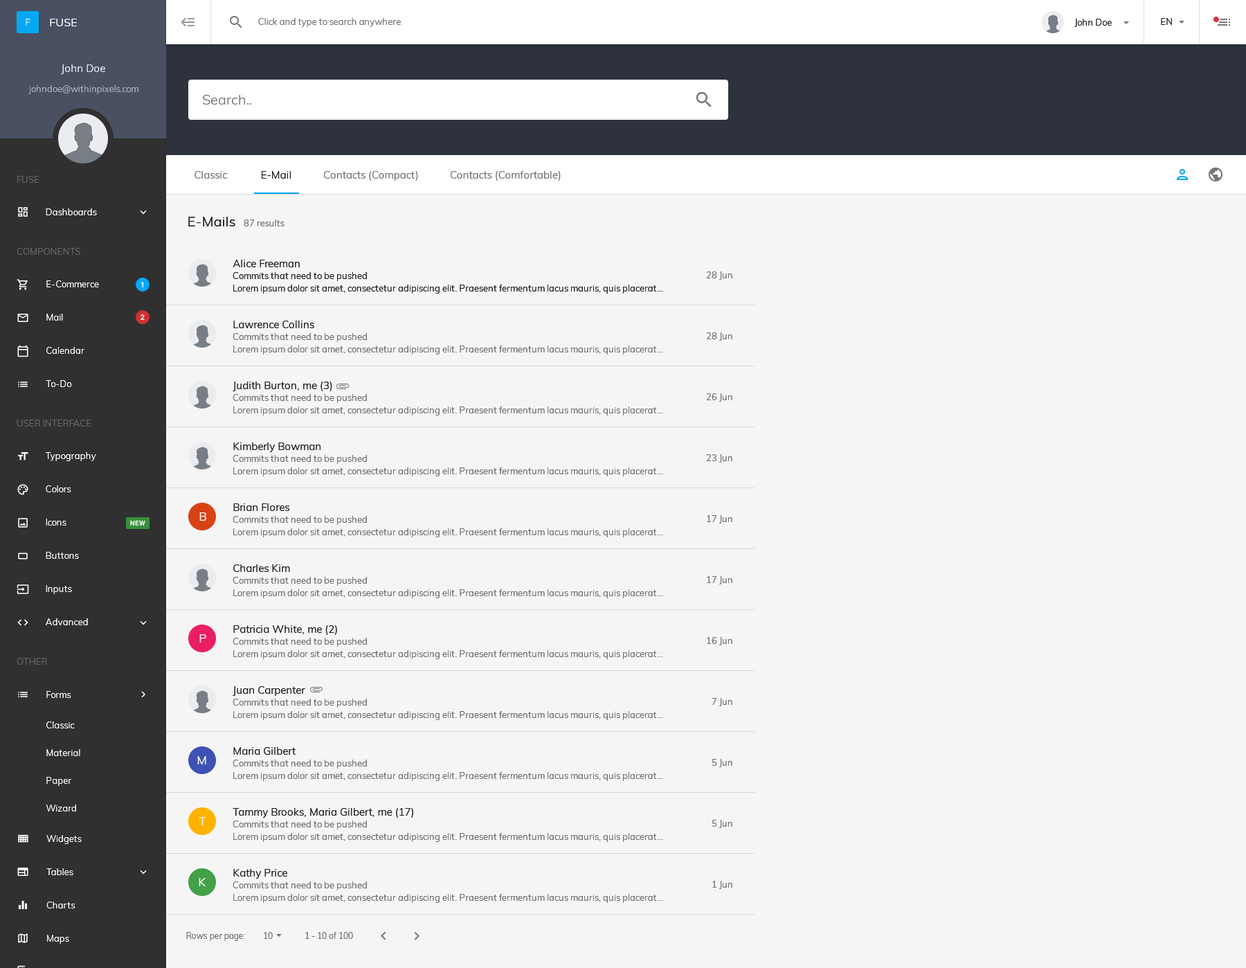
<style>
.page{position:relative;width:1246px;height:968px;background:#f5f5f5}
.page>*{position:absolute;margin:0}
.t1{font:13.8px "Muli-Light";color:#707070}
.t2{font:10.4px "Muli-Regular";color:#757575}
.t3{font:10.4px "Muli-Regular";color:#212121}
.t4{font:13.8px "Muli-Regular";color:#202020}
.t5{font:9px "Muli-Regular";color:#707070}
.t6{font:10.4px "Muli-Regular";color:#202020}
.t7{font:9px/12.5px "Muli-Regular";color:#202020}
.t8{font:9px/12.5px "Muli-Regular";color:#707070}
.t9{font:11.8px "Muli-Regular";color:#ffffff}
.t10{font:8.3px "Muli-Regular";color:#707070}
</style>
<div class="page">
<p class="t1" style="left:203px;top:95px;width:48px;height:10px">Search..</p>
<p class="t2" style="left:195px;top:171px;width:33px;height:8px">Classic</p>
<p class="t3" style="left:262px;top:171px;width:29px;height:8px">E-Mail</p>
<p class="t2" style="left:324px;top:171px;width:94px;height:10px">Contacts (Compact)</p>
<p class="t2" style="left:451px;top:171px;width:110px;height:10px">Contacts (Comfortable)</p>
<p class="t4" style="left:188px;top:217px;width:47px;height:9px">E-Mails</p>
<p class="t5" style="left:244px;top:219px;width:41px;height:7px">87 results</p>
<p class="t6" style="left:233px;top:260px;width:67px;height:7px">Alice Freeman</p>
<p class="t7" style="left:233px;top:272px;width:430px;height:22px">Commits that need to be pushed<br>Lorem ipsum dolor sit amet, consectetur adipiscing elit. Praesent fermentum lacus mauris, quis placerat...</p>
<p class="t5" style="left:706px;top:271px;width:26px;height:9px">28 Jun</p>
<p class="t6" style="left:233px;top:321px;width:81px;height:7px">Lawrence Collins</p>
<p class="t8" style="left:233px;top:333px;width:430px;height:21px">Commits that need to be pushed<br>Lorem ipsum dolor sit amet, consectetur adipiscing elit. Praesent fermentum lacus mauris, quis placerat...</p>
<p class="t5" style="left:706px;top:332px;width:26px;height:9px">28 Jun</p>
<p class="t6" style="left:233px;top:381px;width:99px;height:11px">Judith Burton, me (3)</p>
<p class="t8" style="left:233px;top:394px;width:430px;height:21px">Commits that need to be pushed<br>Lorem ipsum dolor sit amet, consectetur adipiscing elit. Praesent fermentum lacus mauris, quis placerat...</p>
<p class="t5" style="left:706px;top:393px;width:26px;height:9px">26 Jun</p>
<p class="t6" style="left:233px;top:442px;width:88px;height:11px">Kimberly Bowman</p>
<p class="t8" style="left:233px;top:455px;width:430px;height:21px">Commits that need to be pushed<br>Lorem ipsum dolor sit amet, consectetur adipiscing elit. Praesent fermentum lacus mauris, quis placerat...</p>
<p class="t5" style="left:706px;top:454px;width:26px;height:8px">23 Jun</p>
<p class="t6" style="left:233px;top:503px;width:56px;height:8px">Brian Flores</p>
<p class="t9" style="left:199px;top:512px;width:7px;height:9px">B</p>
<p class="t8" style="left:233px;top:516px;width:430px;height:21px">Commits that need to be pushed<br>Lorem ipsum dolor sit amet, consectetur adipiscing elit. Praesent fermentum lacus mauris, quis placerat...</p>
<p class="t5" style="left:707px;top:515px;width:25px;height:8px">17 Jun</p>
<p class="t6" style="left:233px;top:564px;width:57px;height:8px">Charles Kim</p>
<p class="t8" style="left:233px;top:577px;width:430px;height:21px">Commits that need to be pushed<br>Lorem ipsum dolor sit amet, consectetur adipiscing elit. Praesent fermentum lacus mauris, quis placerat...</p>
<p class="t5" style="left:707px;top:576px;width:25px;height:8px">17 Jun</p>
<p class="t6" style="left:233px;top:625px;width:104px;height:10px">Patricia White, me (2)</p>
<p class="t9" style="left:199px;top:634px;width:7px;height:8px">P</p>
<p class="t8" style="left:233px;top:638px;width:430px;height:21px">Commits that need to be pushed<br>Lorem ipsum dolor sit amet, consectetur adipiscing elit. Praesent fermentum lacus mauris, quis placerat...</p>
<p class="t5" style="left:707px;top:637px;width:25px;height:8px">16 Jun</p>
<p class="t6" style="left:233px;top:686px;width:72px;height:10px">Juan Carpenter</p>
<p class="t8" style="left:233px;top:699px;width:430px;height:21px">Commits that need to be pushed<br>Lorem ipsum dolor sit amet, consectetur adipiscing elit. Praesent fermentum lacus mauris, quis placerat...</p>
<p class="t5" style="left:712px;top:698px;width:20px;height:8px">7 Jun</p>
<p class="t6" style="left:233px;top:747px;width:63px;height:8px">Maria Gilbert</p>
<p class="t9" style="left:197px;top:756px;width:9px;height:8px">M</p>
<p class="t8" style="left:233px;top:759px;width:430px;height:22px">Commits that need to be pushed<br>Lorem ipsum dolor sit amet, consectetur adipiscing elit. Praesent fermentum lacus mauris, quis placerat...</p>
<p class="t5" style="left:712px;top:759px;width:20px;height:8px">5 Jun</p>
<p class="t6" style="left:233px;top:808px;width:180px;height:10px">Tammy Brooks, Maria Gilbert, me (17)</p>
<p class="t9" style="left:199px;top:817px;width:7px;height:8px">T</p>
<p class="t8" style="left:233px;top:820px;width:430px;height:22px">Commits that need to be pushed<br>Lorem ipsum dolor sit amet, consectetur adipiscing elit. Praesent fermentum lacus mauris, quis placerat...</p>
<p class="t5" style="left:712px;top:820px;width:20px;height:8px">5 Jun</p>
<p class="t6" style="left:233px;top:869px;width:54px;height:10px">Kathy Price</p>
<p class="t9" style="left:199px;top:878px;width:7px;height:8px">K</p>
<p class="t8" style="left:233px;top:881px;width:430px;height:22px">Commits that need to be pushed<br>Lorem ipsum dolor sit amet, consectetur adipiscing elit. Praesent fermentum lacus mauris, quis placerat...</p>
<p class="t5" style="left:712px;top:881px;width:20px;height:8px">1 Jun</p>
<p class="t10" style="left:186px;top:932px;width:59px;height:9px">Rows per page:</p>
<p class="t10" style="left:264px;top:932px;width:9px;height:7px">10</p>
<p class="t10" style="left:305px;top:932px;width:48px;height:7px">1 - 10 of 100</p>
</div>
